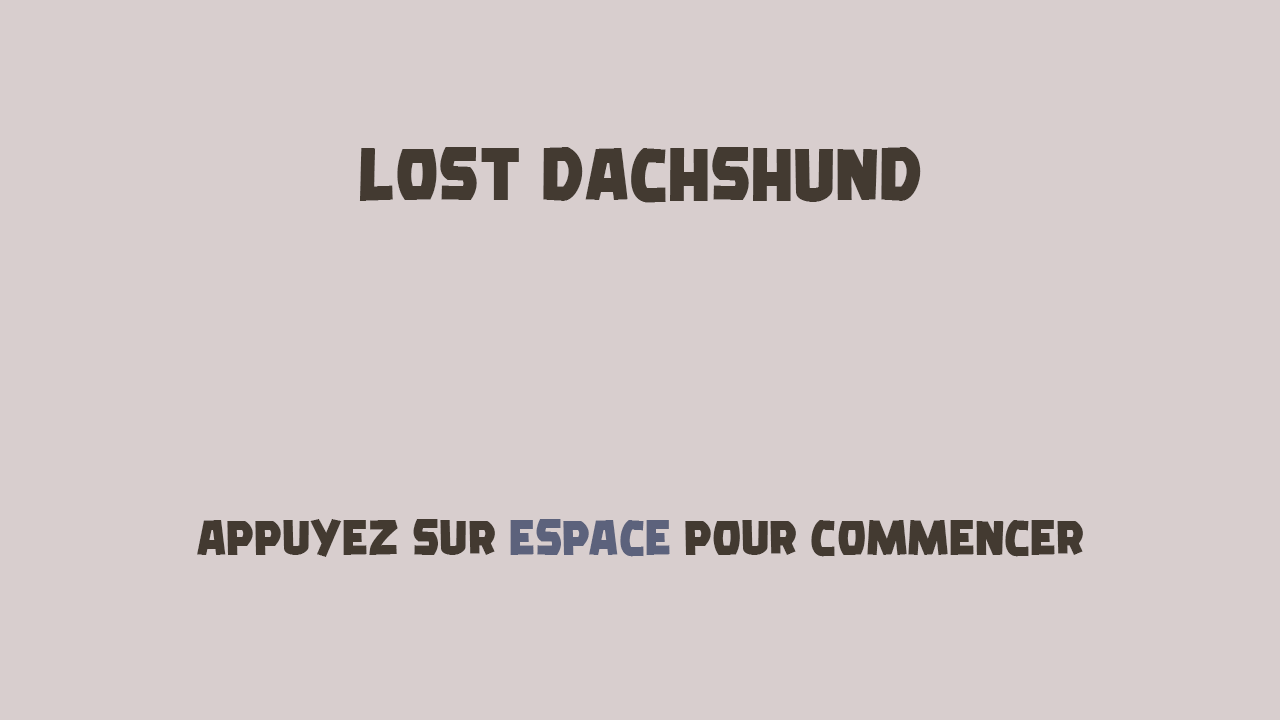
<style>
.page{position:relative;width:1280px;height:720px;background:#d8cece}
.page>*{position:absolute;margin:0}
.t1{font:66.7px "Golden-Smile";color:#433a31}
.t2{font:44.8px "Golden-Smile";color:#433a31}
.t3{font:44.8px "Golden-Smile";color:#5c627c}
</style>
<div class="page">
<p class="t1" style="left:359px;top:147px;width:562px;height:56px">LOST DACHSHUND</p>
<p class="t2" style="left:197px;top:519px;width:886px;height:38px">APPUYEZ SUR <span class="t3">ESPACE </span>POUR COMMENCER</p>
</div>
